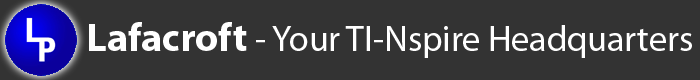
<style>
.page{position:relative;width:700px;height:80px;background:#333333}
.page>*{position:absolute;margin:0}
.t1{font:36px "MyriadPro-Regular";color:#ffffff}
.t2{font:40px "MyriadPro-Bold";color:#ffffff}
</style>
<div class="page">
<p class="t1" style="left:89px;top:22px;width:603px;height:36px"><span class="t2">Lafacroft</span> - Your TI-Nspire Headquarters</p>
</div>
